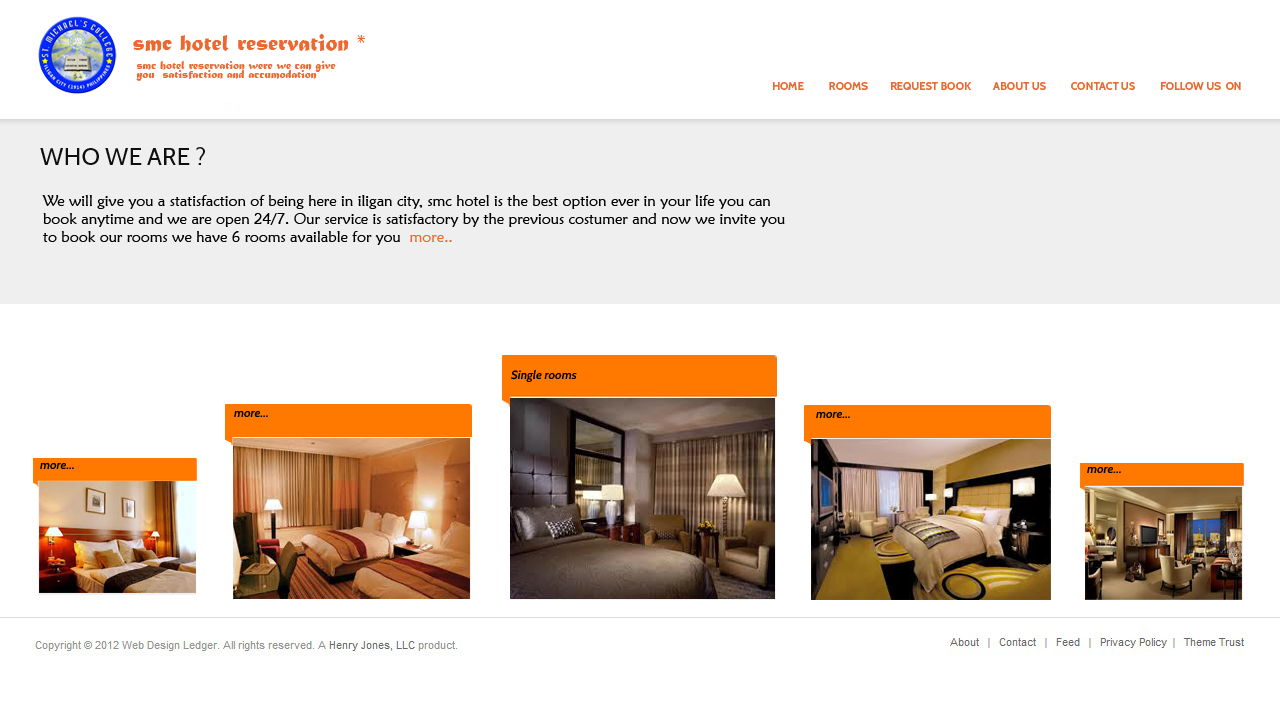
<style>
.page{position:relative;width:1280px;height:720px;background:#ffffff}
.page>*{position:absolute;margin:0}
.t1{font:24px "MaturaMTScriptCapitals";color:#eb6830}
.t2{font:12px/9px "MaturaMTScriptCapitals";color:#eb6830}
.t3{font:11px "Cabin-Bold";color:#eb6830}
.t4{font:24px "Cabin-Regular";color:#0f0f0f}
.t5{font:15px "MaiandraGD-Regular";color:#000000}
.t6{font:15px "MaiandraGD-Regular";color:#eb6830}
.t7{font:12px "Cabin-BoldItalic";color:#000000}
</style>
<div class="page">
<p class="t1" style="left:133px;top:34px;width:233px;height:18px">smc hotel reservation *</p>
<p class="t2" style="left:136px;top:61px;width:200px;height:20px">smc hotel reservation were we can give <br>you  satisfaction and accumodation</p>
<p class="t3" style="left:773px;top:82px;width:468px;height:8px">HOME          ROOMS         REQUEST BOOK         ABOUT US          CONTACT US          FOLLOW US  ON</p>
<p class="t4" style="left:40px;top:147px;width:165px;height:18px">WHO WE ARE ?</p>
<p class="t5" style="left:42px;top:195px;width:743px;height:50px">We will give you a statisfaction of being here in iligan city, smc hotel is the best option ever in your life you can <br>book anytime and we are open 24/7. Our service is satisfactory by the previous costumer and now we invite you <br>to book our rooms we have 6 rooms available for you  <span class="t6">more..</span></p>
<p class="t7" style="left:511px;top:370px;width:66px;height:12px">Single rooms</p>
<p class="t7" style="left:234px;top:411px;width:34px;height:6px">more...</p>
<p class="t7" style="left:816px;top:412px;width:34px;height:6px">more...</p>
<p class="t7" style="left:40px;top:463px;width:34px;height:6px">more...</p>
<p class="t7" style="left:1087px;top:467px;width:34px;height:6px">more...</p>
</div>
